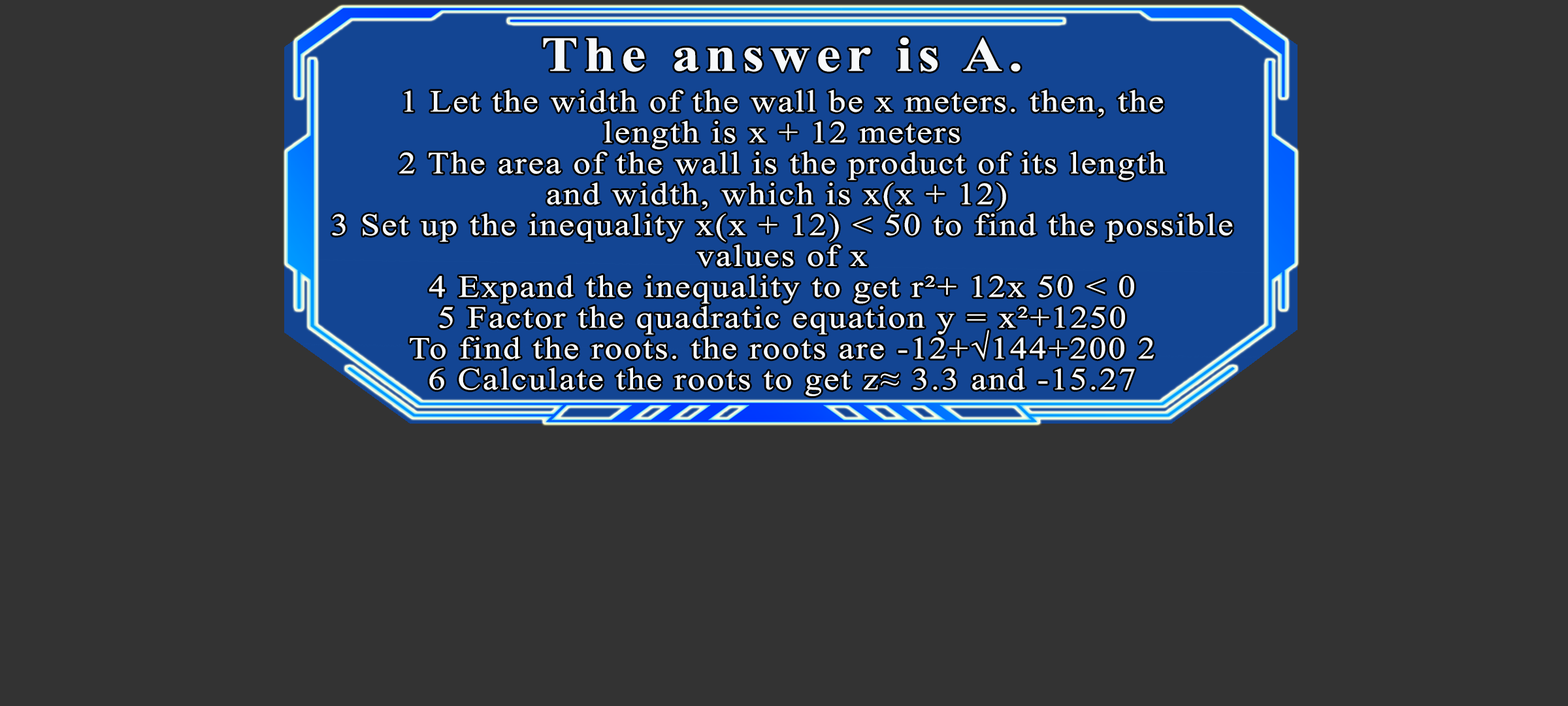
<style>
.page{position:relative;width:1568px;height:706px;background:#333333}
.page>*{position:absolute;margin:0}
.t1{font:49px "TimesNewRomanPS-BoldMT";letter-spacing:0.115em;color:#f7f9fb;scale:1.12 1}
.t2{font:30.9px/30.9px "TimesNewRomanPSMT";letter-spacing:0.055em;color:#f7f9fb;scale:1.12 1}
</style>
<div class="page">
<p class="t1" style="left:543px;top:37px;width:478px;height:35px">The answer is A.</p>
<p class="t2" style="left:332px;top:90px;width:901px;height:306px;text-align:center">1 Let the width of the wall be x meters. then, the<br>length is x + 12 meters<br>2 The area of the wall is the product of its length<br>and width, which is x(x + 12) <br>3 Set up the inequality x(x + 12) &lt; 50 to find the possible<br>values of x<br>4 Expand the inequality to get r²+ 12x 50 &lt; 0<br>5 Factor the quadratic equation y = x²+1250<br>To find the roots. the roots are -12+√144+200 2<br>6 Calculate the roots to get z≈ 3.3 and -15.27</p>
</div>
